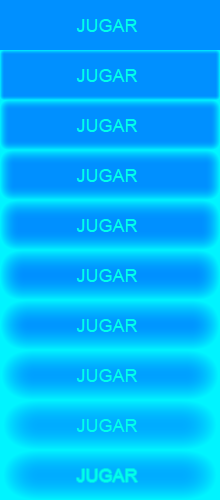
<style>
.page{position:relative;width:220px;height:500px;background:#0090ff}
.page>*{position:absolute;margin:0}
.t1{font:18px "ArialMT";color:#00ffea}
</style>
<div class="page">
<p class="t1" style="left:76px;top:19px;width:62px;height:13px">JUGAR</p>
<p class="t1" style="left:76px;top:69px;width:62px;height:13px">JUGAR</p>
<p class="t1" style="left:76px;top:119px;width:62px;height:13px">JUGAR</p>
<p class="t1" style="left:76px;top:169px;width:62px;height:13px">JUGAR</p>
<p class="t1" style="left:76px;top:219px;width:62px;height:13px">JUGAR</p>
<p class="t1" style="left:76px;top:269px;width:62px;height:13px">JUGAR</p>
<p class="t1" style="left:76px;top:319px;width:62px;height:13px">JUGAR</p>
<p class="t1" style="left:76px;top:369px;width:62px;height:13px">JUGAR</p>
<p class="t1" style="left:76px;top:419px;width:62px;height:13px">JUGAR</p>
<p class="t1" style="left:76px;top:469px;width:62px;height:13px">JUGAR</p>
</div>
